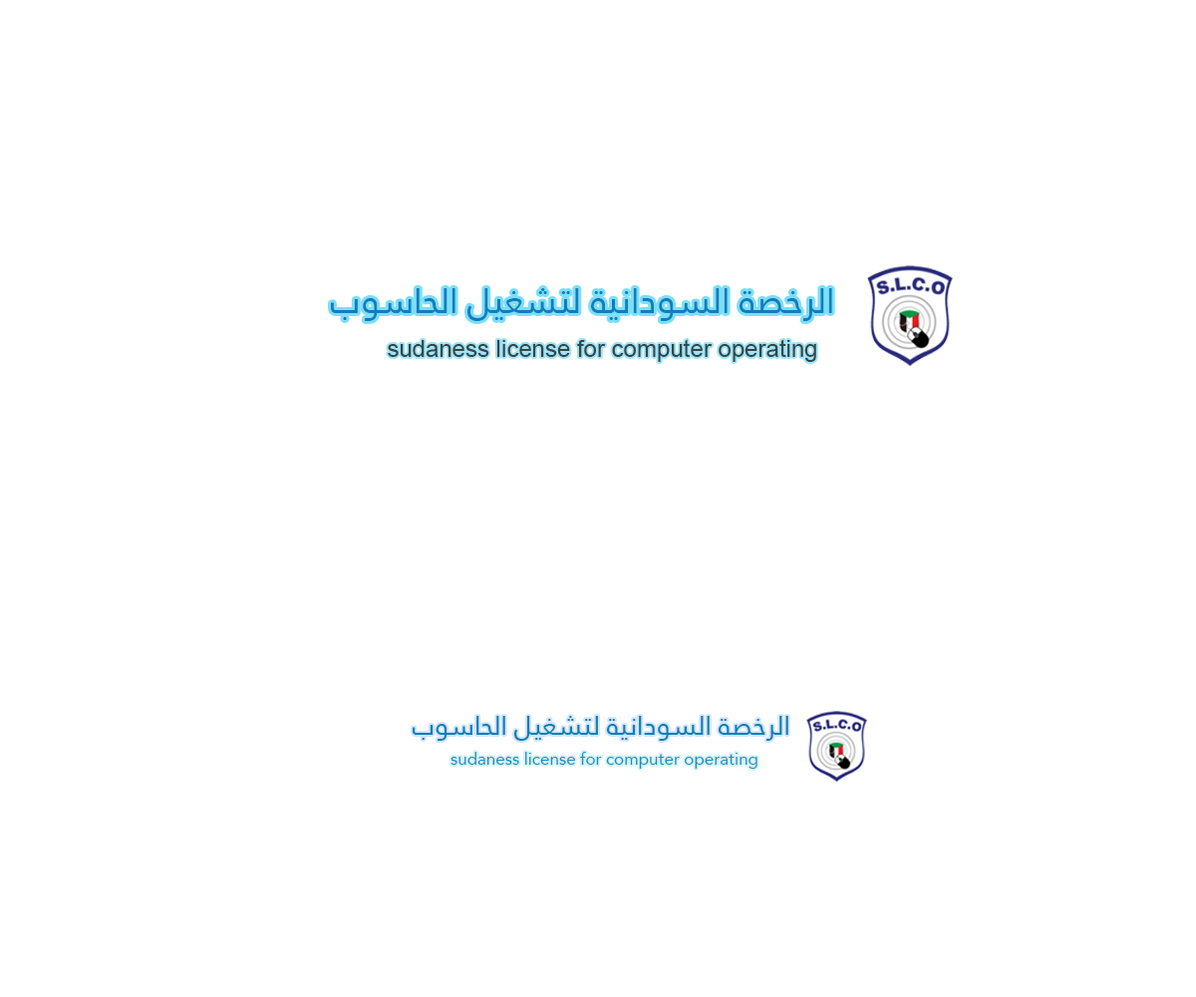
<style>
.page{position:relative;width:1196px;height:997px;background:#ffffff}
.page>*{position:absolute;margin:0}
.t1{font:35.9px "JannaLT-Regular";color:#147cbd}
.t2{font:23.9px "ArialMT";color:#374546}
</style>
<div class="page">
<p class="t1" style="left:331px;top:288px;width:501px;height:33px">الرخصة السودانية لتشغيل الحاسوب</p>
<p class="t2" style="left:388px;top:339px;width:428px;height:23px">sudaness license for computer operating</p>
</div>
